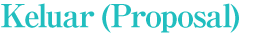
<style>
.page{position:relative;width:277px;height:34px;background:#ffffff}
.page>*{position:absolute;margin:0}
.t1{font:32px "RyuminPro-ExBold";letter-spacing:-0.06em;color:#21bebf}
</style>
<div class="page">
<p class="t1" style="left:1px;top:3px;width:238px;height:30px">Keluar (Proposal)</p>
</div>
